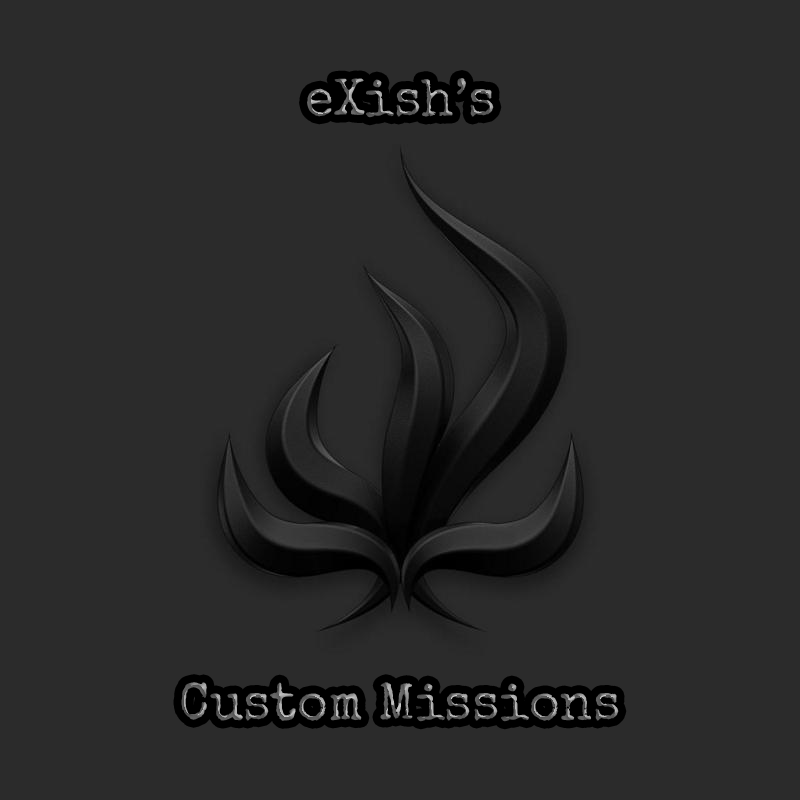
<style>
.page{position:relative;width:800px;height:800px;background:#2b2b2b}
.page>*{position:absolute;margin:0}
.t1{font:52.5px "SpecialElite-Regular"}
</style>
<div class="page">
<p class="t1" style="left:307px;top:78px;width:187px;height:40px">eXish’s</p>
<p class="t1" style="left:181px;top:682px;width:438px;height:40px">Custom Missions</p>
</div>
